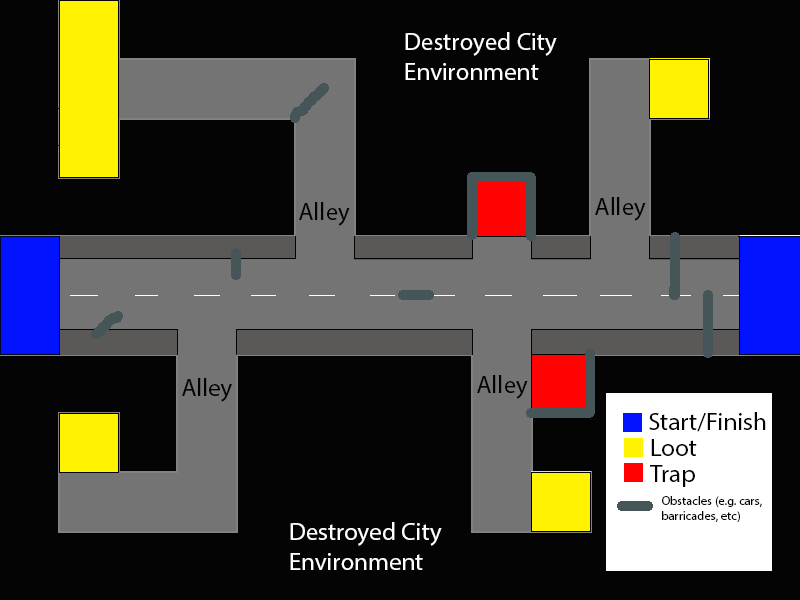
<style>
.page{position:relative;width:800px;height:600px;background:#040404}
.page>*{position:absolute;margin:0}
.t1{font:25px "MyriadPro-Regular";color:#ffffff}
.t2{font:25px "MyriadPro-Regular";color:#030303}
.t3{font:12.5px "MyriadPro-Regular";color:#030303}
</style>
<div class="page">
<p class="t1" style="left:405px;top:32px;width:152px;height:48px">Destroyed City Environment</p>
<p class="t2" style="left:595px;top:197px;width:51px;height:24px">Alley</p>
<p class="t2" style="left:299px;top:202px;width:51px;height:24px">Alley</p>
<p class="t2" style="left:477px;top:375px;width:51px;height:24px">Alley</p>
<p class="t2" style="left:182px;top:378px;width:50px;height:24px">Alley</p>
<p class="t2" style="left:649px;top:412px;width:117px;height:20px">Start/Finish</p>
<p class="t2" style="left:651px;top:439px;width:46px;height:17px">Loot</p>
<p class="t2" style="left:650px;top:465px;width:45px;height:22px">Trap</p>
<p class="t3" style="left:662px;top:496px;width:100px;height:26px">Obstacles (e.g. cars, barricades, etc)</p>
<p class="t1" style="left:290px;top:522px;width:152px;height:48px">Destroyed City Environment</p>
</div>
